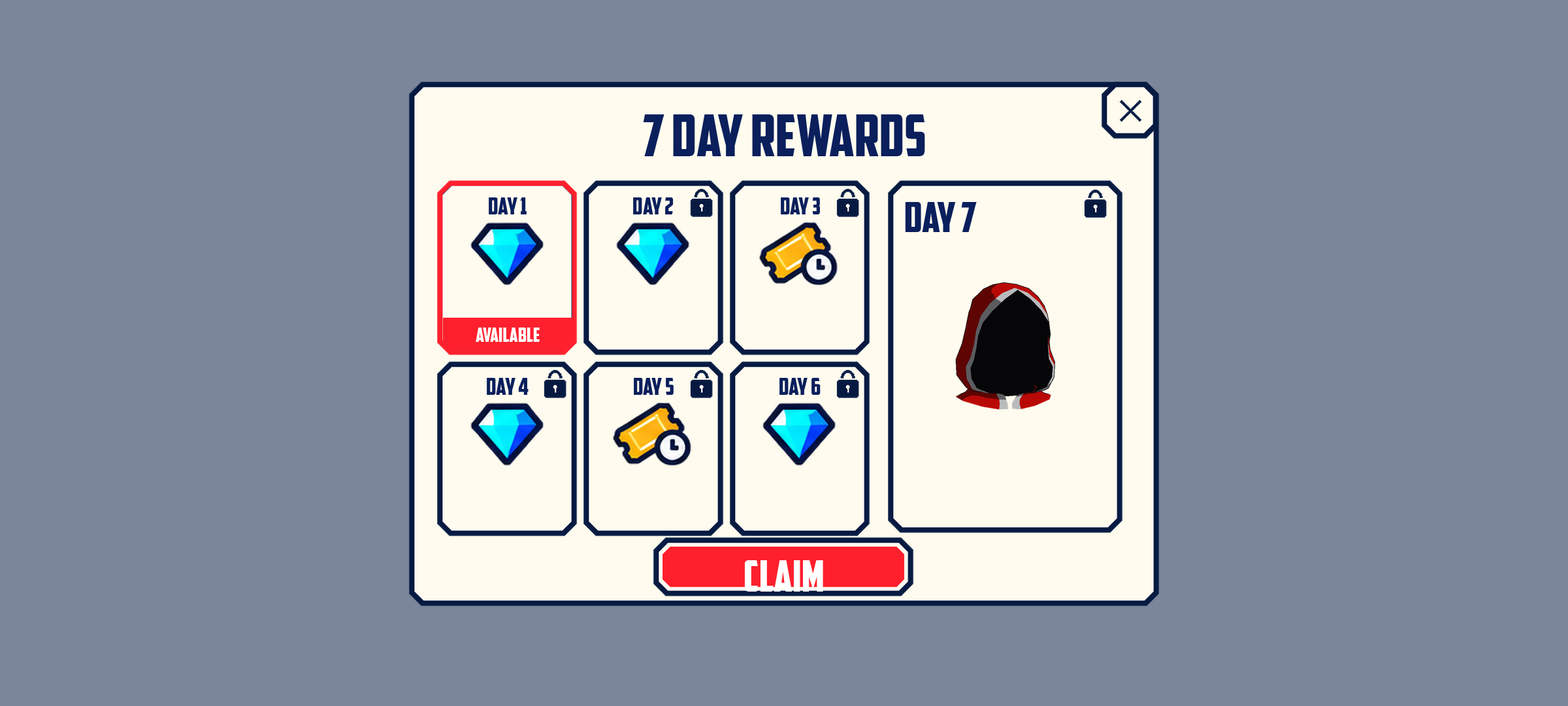
<style>
.page{position:relative;width:1568px;height:706px;background:#7b869a}
.page>*{position:absolute;margin:0}
.t1{font:57.5px "AmericanCaptain";color:#0a1f5c}
.t2{font:23.5px "AmericanCaptain";color:#0a1f5c}
.t3{font:41.8px "AmericanCaptain";color:#0a1f5c}
.t4{font:19.6px "AmericanCaptain";color:#ffffff}
.t5{font:43.1px "AmericanCaptain";color:#ffffff}
</style>
<div class="page">
<p class="t1" style="left:643px;top:114px;width:282px;height:42px">7 DAY REWARDS</p>
<p class="t2" style="left:489px;top:197px;width:38px;height:17px">DAY 1</p>
<p class="t2" style="left:633px;top:197px;width:41px;height:17px">DAY 2</p>
<p class="t2" style="left:781px;top:197px;width:39px;height:17px">DAY 3</p>
<p class="t3" style="left:905px;top:202px;width:72px;height:30px">DAY 7</p>
<p class="t4" style="left:476px;top:327px;width:64px;height:15px">AVAILABLE</p>
<p class="t2" style="left:487px;top:378px;width:42px;height:17px">DAY 4</p>
<p class="t2" style="left:634px;top:378px;width:40px;height:17px">DAY 5</p>
<p class="t2" style="left:779px;top:378px;width:42px;height:17px">DAY 6</p>
<p class="t5" style="left:745px;top:560px;width:78px;height:31px">CLAIM</p>
</div>
